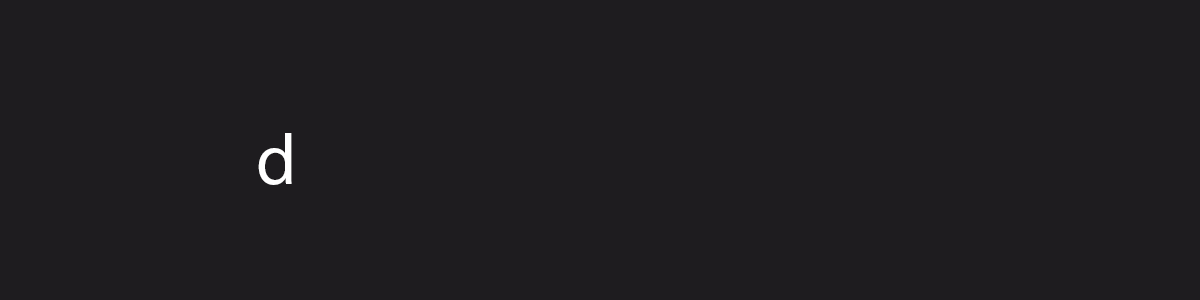
<style>
.page{position:relative;width:1200px;height:300px;background:#1e1c1f}
.page>*{position:absolute;margin:0}
.t1{font:72px "MyriadPro-Regular";color:#ffffff}
</style>
<div class="page">
<p class="t1" style="left:258px;top:133px;width:34px;height:52px">d</p>
</div>
